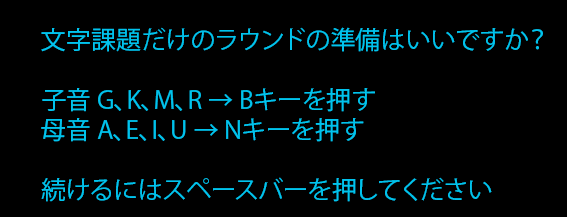
<style>
.page{position:relative;width:567px;height:217px;background:#000000}
.page>*{position:absolute;margin:0}
.t1{font:25px "KozGoPr6N-Regular";color:#00c3ed}
</style>
<div class="page">
<p class="t1" style="left:41px;top:27px;width:502px;height:175px">文字課題だけのラウンドの準備はいいですか？<br><br>子音 G、K、M、R → Bキーを押す<br>母音 A、E、I、U → Nキーを押す<br><br>続けるにはスペースバーを押してください</p>
</div>
